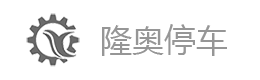
<style>
.page{position:relative;width:260px;height:80px;background:#ffffff}
.page>*{position:absolute;margin:0}
.t1{font:32px "MicrosoftYaHei";color:#969696}
</style>
<div class="page">
<p class="t1" style="left:102px;top:24px;width:125px;height:32px">隆奥停车</p>
</div>
